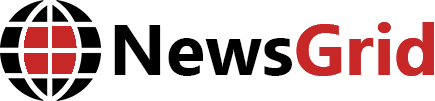
<style>
.page{position:relative;width:435px;height:101px;background:#ffffff}
.page>*{position:absolute;margin:0}
.t1{font:72px "Ebrima-Bold"}
.t2{font:72px "Ebrima-Bold";color:#000000}
.t3{font:72px "Ebrima-Bold";color:#c72727}
</style>
<div class="page">
<p class="t1" style="left:114px;top:22px;width:320px;height:54px">NewsGrid</p>
<p class="t2" style="left:114px;top:22px;width:320px;height:54px">News<span class="t3">Grid</span></p>
</div>
